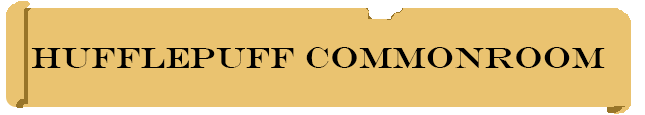
<style>
.page{position:relative;width:645px;height:115px;background:#eac370}
.page>*{position:absolute;margin:0}
.t1{font:30px "EngraversMT";color:#000000}
</style>
<div class="page">
<p class="t1" style="left:31px;top:47px;width:574px;height:21px">Hufflepuff Commonroom</p>
</div>
